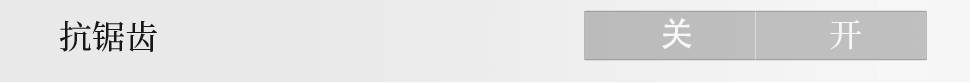
<style>
.page{position:relative;width:971px;height:83px;background:#e9e9e9}
.page>*{position:absolute;margin:0}
.t1{font:33.1px "SourceHanSerifSC-Medium";color:#000000}
.t2{font:33.1px "AdobeHeitiStd-Regular";color:#ffffff}
.t3{font:33.1px "SourceHanSerifSC-Medium";color:#ffffff}
</style>
<div class="page">
<p class="t1" style="left:59px;top:20px;width:98px;height:32px;opacity:0.9">抗锯齿</p>
<p class="t2" style="left:662px;top:18px;width:30px;height:31px;opacity:0.9">关</p>
<p class="t3" style="left:830px;top:20px;width:32px;height:30px;opacity:0.9">开</p>
</div>
